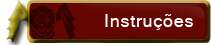
<style>
.page{position:relative;width:211px;height:45px;background:#650600}
.page>*{position:absolute;margin:0}
.t1{font:18px "MicrosoftSansSerif";letter-spacing:0.04em;color:#ffffff}
</style>
<div class="page">
<p class="t1" style="left:105px;top:14px;width:88px;height:16px">Instruções</p>
</div>
